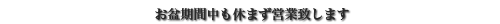
<style>
.page{position:relative;width:500px;height:24px;background:#ffffff}
.page>*{position:absolute;margin:0}
.t1{font:13px "HiraMinProN-W6";color:#292929}
</style>
<div class="page">
<p class="t1" style="left:155px;top:7px;width:194px;height:14px">お盆期間中も休まず営業致します</p>
</div>
